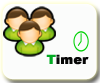
<style>
.page{position:relative;width:100px;height:83px;background:#fbfcfb}
.page>*{position:absolute;margin:0}
.t1{font:12.6px "Arial-Black";color:#060606;font-weight:bold}
.t2{font:12.6px "Arial-Black";color:#03ab24;font-weight:bold}
</style>
<div class="page">
<p class="t1" style="left:46px;top:54px;width:43px;height:11px"><span class="t2">T</span>imer</p>
</div>
